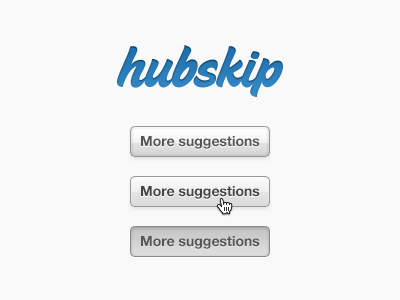
<style>
.page{position:relative;width:400px;height:300px;background:#f9f9f9}
.page>*{position:absolute;margin:0}
.t1{font:14px "HelveticaNeue-Bold";color:#555555}
.t2{font:14px "HelveticaNeue-Bold";color:#444444}
</style>
<div class="page">
<p class="t1" style="left:141px;top:136px;width:119px;height:13px">More suggestions</p>
<p class="t2" style="left:141px;top:186px;width:119px;height:13px">More suggestions</p>
<p class="t1" style="left:141px;top:236px;width:119px;height:13px">More suggestions</p>
</div>
